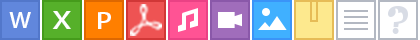
<style>
.page{position:relative;width:420px;height:40px;background:#ffffff}
.page>*{position:absolute;margin:0}
.t1{font:20.6px "AdobeHeitiStd-Regular";letter-spacing:0.16em;color:#ffffff;scale:1.17 1}
.t2{font:23.5px "AdobeHeitiStd-Regular";letter-spacing:0.16em;color:#ffffff;scale:1.38 1}
.t3{font:21.2px "AdobeHeitiStd-Regular";letter-spacing:0.16em;color:#ffffff;scale:1.32 1}
</style>
<div class="page">
<p class="t1" style="left:9px;top:12px;width:22px;height:16px">W</p>
<p class="t2" style="left:52px;top:11px;width:19px;height:18px">X</p>
<p class="t3" style="left:98px;top:12px;width:13px;height:17px">P</p>
</div>
